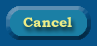
<style>
.page{position:relative;width:97px;height:46px;background:#065389}
.page>*{position:absolute;margin:0}
.t1{font:14px "BookmanOldStyle-Bold";color:#edec86}
</style>
<div class="page">
<p class="t1" style="left:23px;top:17px;width:49px;height:10px">Cancel</p>
</div>
